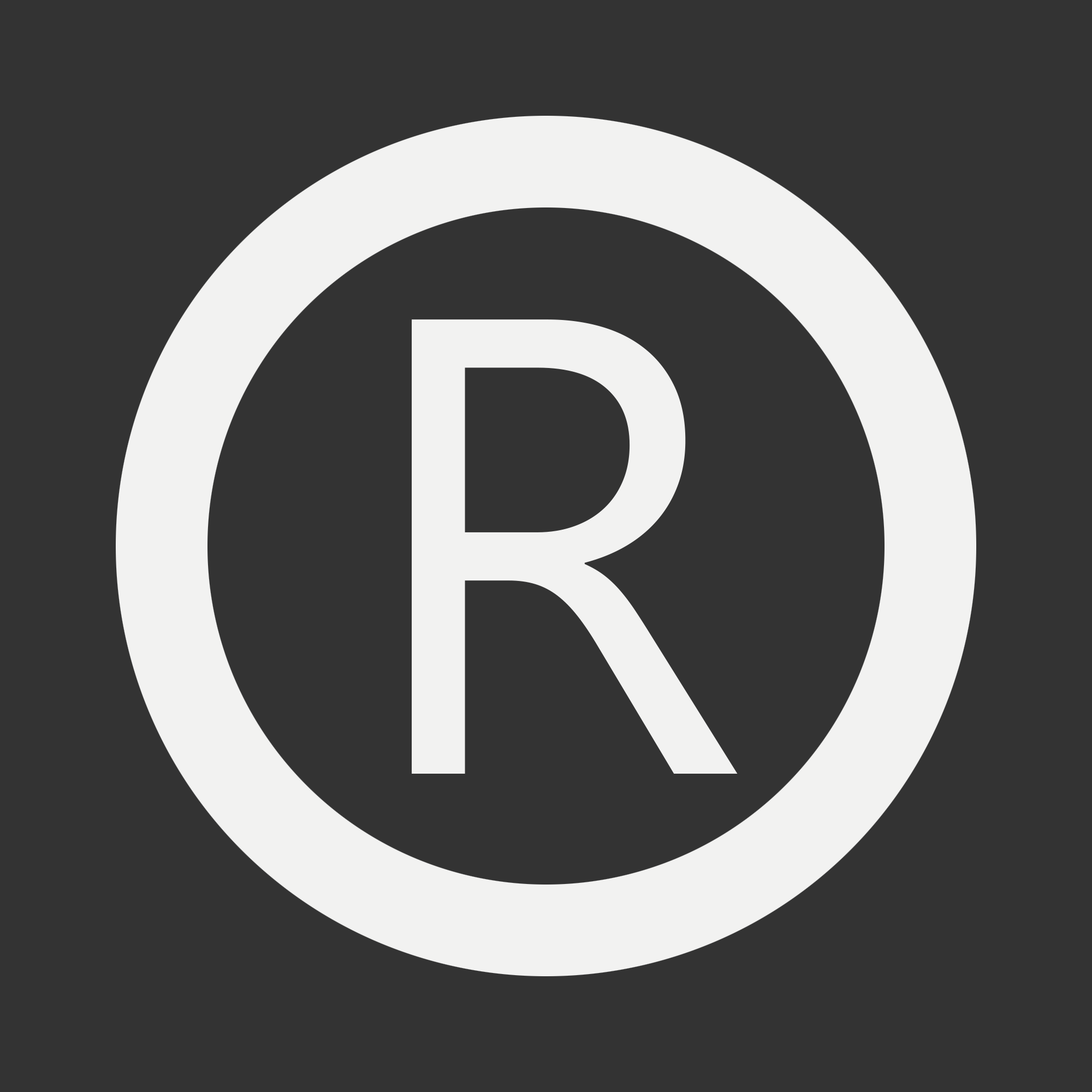
<style>
.page{position:relative;width:1092px;height:1092px;background:#333333}
.page>*{position:absolute;margin:0}
.t1{font:648.5px "SegoeUI";color:#f2f2f1}
</style>
<div class="page">
<p class="t1" style="left:412px;top:319px;width:326px;height:455px">R</p>
</div>
